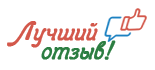
<style>
.page{position:relative;width:155px;height:70px;background:#ffffff}
.page>*{position:absolute;margin:0}
.t1{font:30px "ReginaKursiv-Italic";color:#d3584b;font-weight:bold}
.t2{font:30px "ReginaKursiv-Italic";color:#2c7e42;font-weight:bold}
</style>
<div class="page">
<p class="t1" style="left:7px;top:21px;width:91px;height:27px">Лучший</p>
<p class="t2" style="left:41px;top:40px;width:75px;height:20px">отзыв!</p>
</div>
